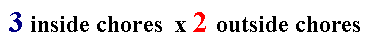
<style>
.page{position:relative;width:382px;height:50px;background:#ffffff}
.page>*{position:absolute;margin:0}
.t1{font:24px "TimesNewRomanPS-BoldMT";color:#000000}
.t2{font:30px "TimesNewRomanPS-BoldMT";color:#000082}
.t3{font:30px "TimesNewRomanPS-BoldMT";color:#ff0000}
</style>
<div class="page">
<p class="t1" style="left:9px;top:12px;width:351px;height:20px"><span class="t2">3 </span>inside chores  x <span class="t3">2 </span>outside chores</p>
</div>
